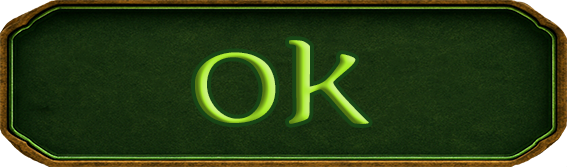
<style>
.page{position:relative;width:567px;height:167px}
.page>*{position:absolute;margin:0}
.t1{font:100px "MiddleEarth"}
</style>
<div class="page">
<p class="t1" style="left:195px;top:40px;width:174px;height:84px">OK</p>
</div>
